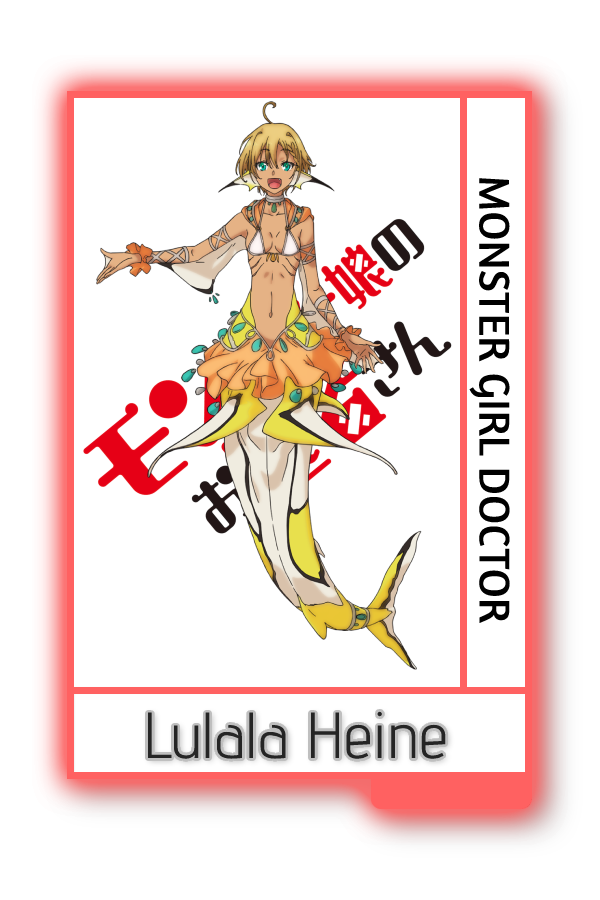
<style>
.page{position:relative;width:600px;height:900px;background:#ffffff}
.page>*{position:absolute;margin:0}
.t1{font:44px "Amaranth-Regular";color:#000000}
.t2{font:65px "AdventPro-Regular";color:#252525}
</style>
<div class="page">
<p class="t1" style="left:469px;top:178px;width:41px;height:446px;rotate:90deg">MONSTER GIRL DOCTOR</p>
<p class="t2" style="left:148px;top:711px;width:298px;height:48px">Lulala Heine</p>
</div>
